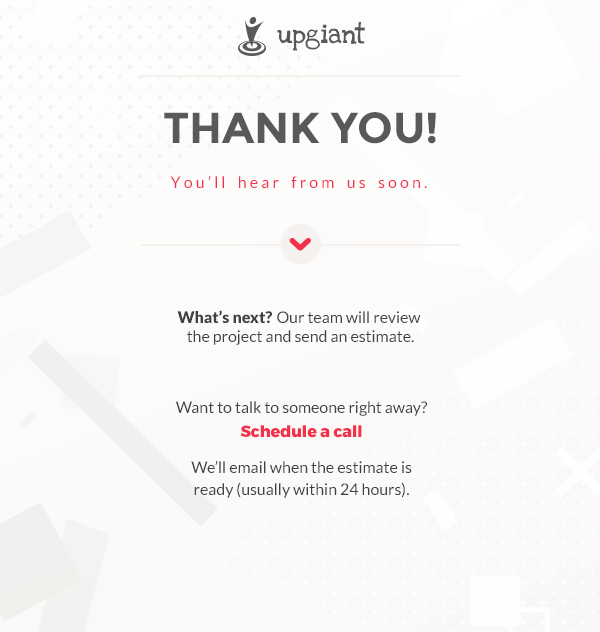
<style>
.page{position:relative;width:600px;height:632px}
.page>*{position:absolute;margin:0}
.t1{font:19.2px "LoveYaLikeASisterSolid";color:#58595b}
.t2{font:43.2px "Montserrat-Bold";color:#58595b}
.t3{font:16px "Lato-Regular";color:#f4314a}
.t4{font:16px "Lato-Regular";color:#414042}
.t5{font:16px "Lato-Black";color:#414042}
.t6{font:16px/36px "Lato-Regular";color:#414042}
.t7{font:16px/24px "Montserrat-ExtraBold";color:#f4314a}
.t8{font:16px/22px "Lato-Regular";color:#414042}
</style>
<div class="page">
<p class="t1" style="left:277px;top:22px;width:88px;height:29px">upgiant</p>
<p class="t2" style="left:164px;top:112px;width:272px;height:32px">THANK YOU!</p>
<p class="t3" style="left:170px;top:176px;width:257px;height:12px">Y o u ’ l l    h e a r    f r o m    u s    s o o n .</p>
<p class="t4" style="left:177px;top:310px;width:244px;height:35px;text-align:center"><span class="t5">What’s next? </span>Our team will review <br>the project and send an estimate.</p>
<p class="t6" style="left:176px;top:401px;width:251px;height:97px;text-align:center">Want to talk to someone right away?<br><span class="t7">Schedule a call<br></span>We’ll email when the estimate is<br><span class="t8">ready (usually within 24 hours).</span></p>
</div>
